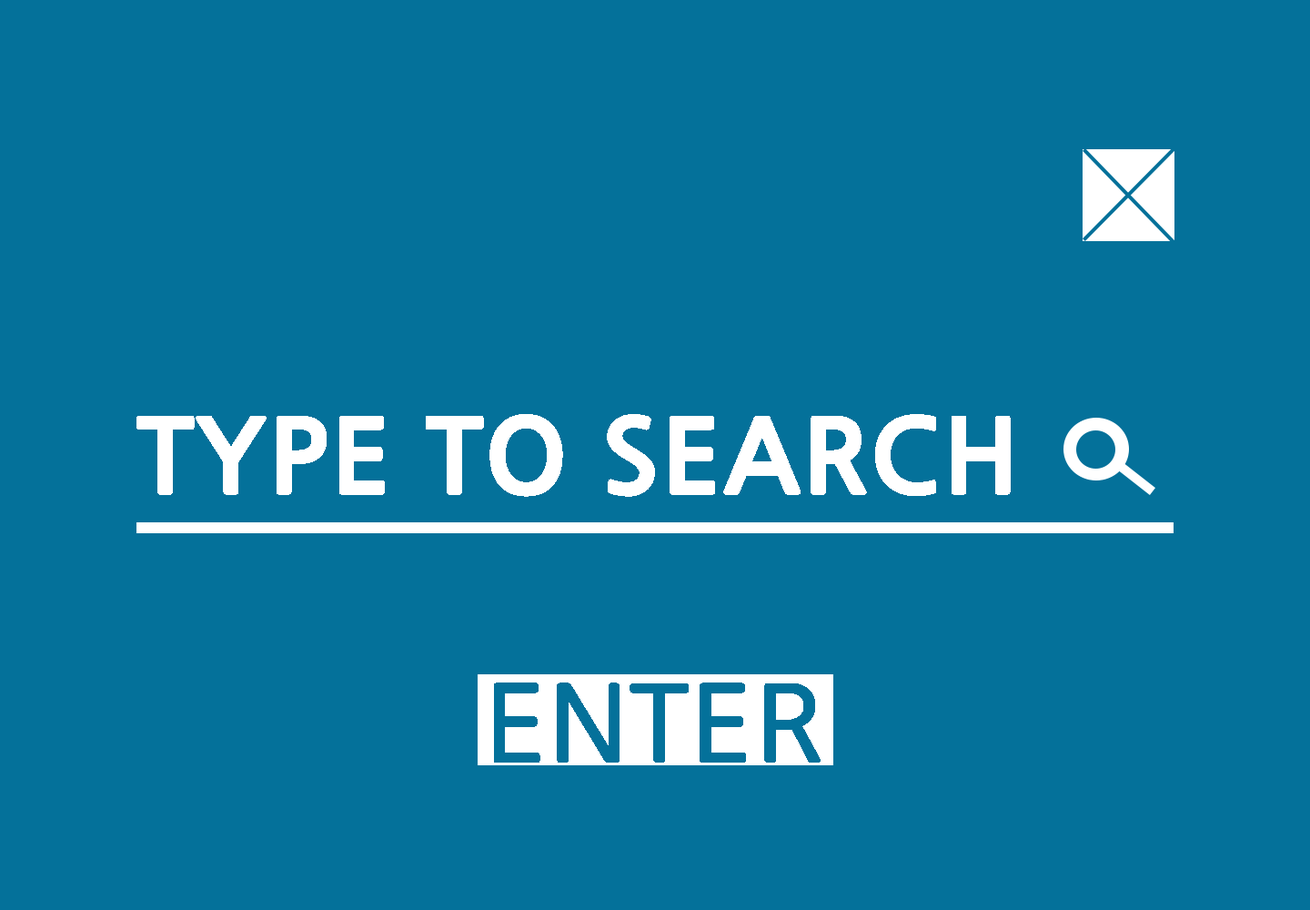
<style>
.page{position:relative;width:1310px;height:910px;background:#04719a}
.page>*{position:absolute;margin:0}
.t1{font:100.1px "NanumGothicBold";color:#ffffff;font-weight:bold;scale:1.04 1}
.t2{font:102.8px "NanumGothic";color:#04719a;text-transform:uppercase;font-weight:bold;scale:1.04 1}
</style>
<div class="page">
<p class="t1" style="left:136px;top:414px;width:875px;height:83px">TYPE TO SEARCH</p>
<p class="t2" style="left:494px;top:682px;width:327px;height:81px">ENTER</p>
</div>
